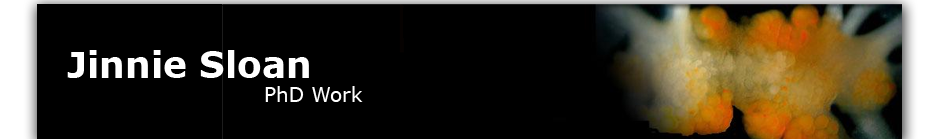
<style>
.page{position:relative;width:937px;height:139px;background:#000000}
.page>*{position:absolute;margin:0}
.t1{font:36px "Verdana-Bold";color:#ffffff}
.t2{font:20px "Verdana";color:#ffffff}
</style>
<div class="page">
<p class="t1" style="left:67px;top:50px;width:242px;height:28px">Jinnie Sloan</p>
<p class="t2" style="left:265px;top:86px;width:98px;height:16px">PhD Work</p>
</div>
